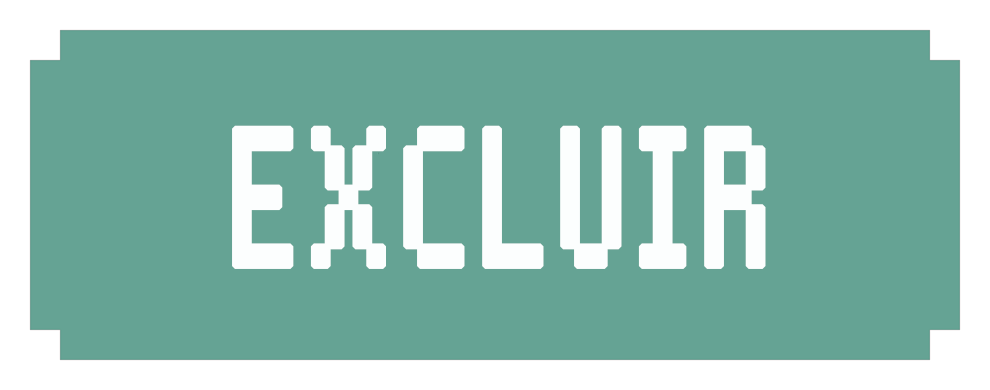
<style>
.page{position:relative;width:990px;height:390px;background:#65a394}
.page>*{position:absolute;margin:0}
.t1{font:255px "Pixelade";letter-spacing:0.025em;color:#fcfefe;font-weight:bold;scale:0.71 1}
</style>
<div class="page">
<p class="t1" style="left:232px;top:125px;width:534px;height:144px">EXCLUIR</p>
</div>
